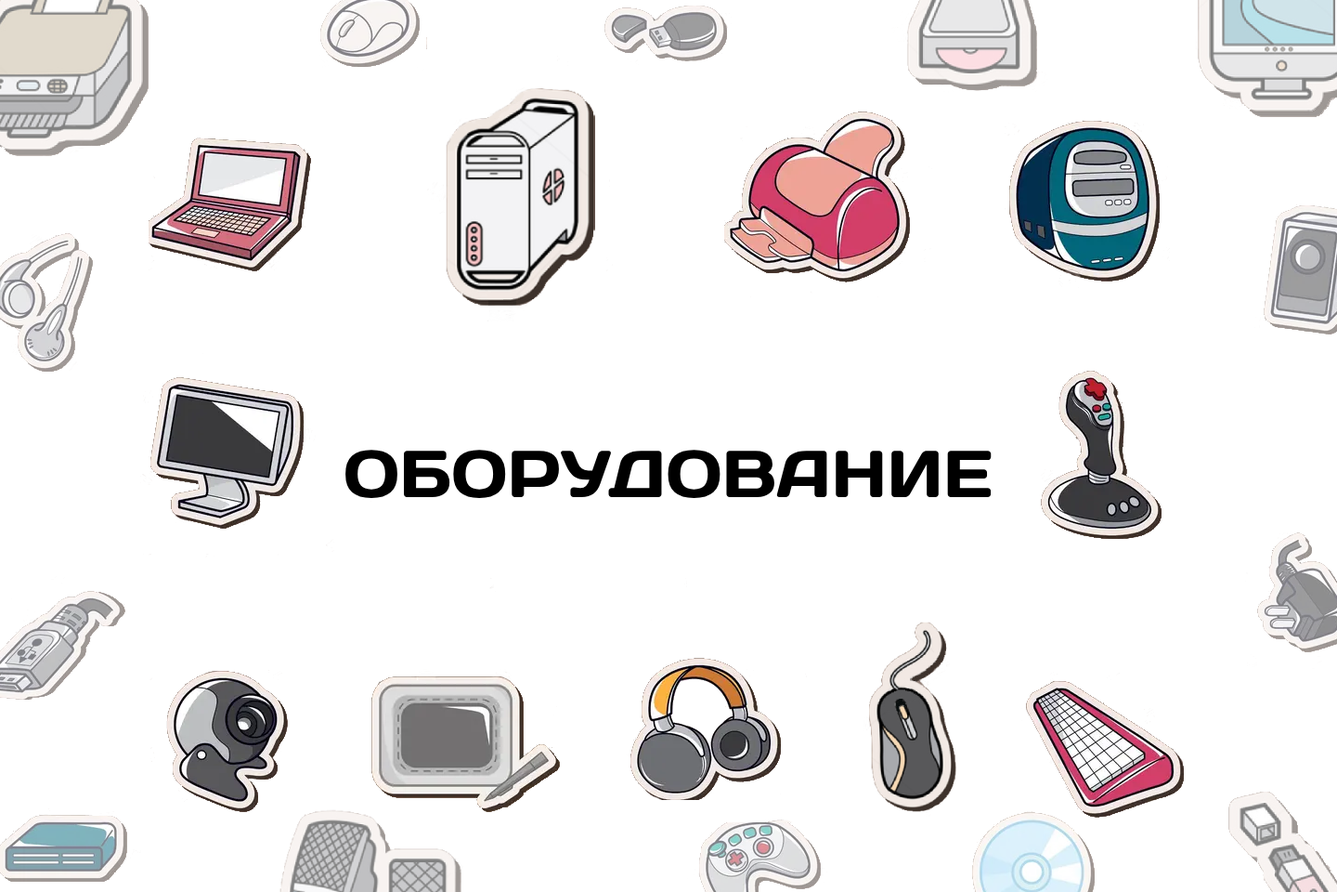
<style>
.page{position:relative;width:1337px;height:892px;background:#ffffff}
.page>*{position:absolute;margin:0}
.t1{font:65.9px "DaysOne-Regular";color:#000000}
</style>
<div class="page">
<p class="t1" style="left:345px;top:450px;width:647px;height:49px">ОБОРУДОВАНИЕ</p>
</div>
